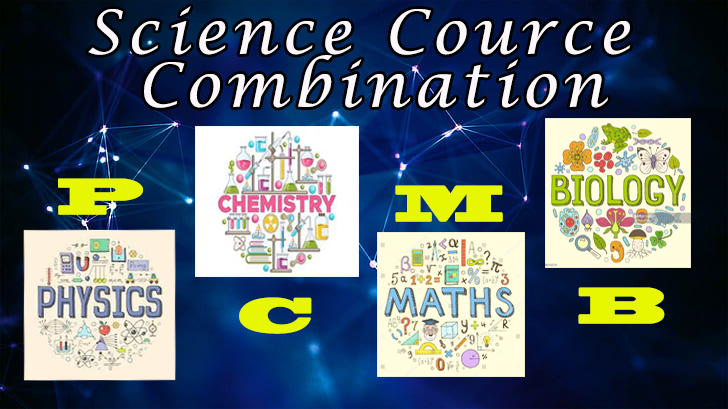
<style>
.page{position:relative;width:728px;height:409px}
.page>*{position:absolute;margin:0}
.t1{font:60px/53px "LucidaCalligraphy-Italic";letter-spacing:0.1em;color:#fbf7fd}
.t2{font:48px "BlackoakStd";letter-spacing:0.1em;color:#e7f702}
</style>
<div class="page">
<p class="t1" style="left:88px;top:6px;width:542px;height:102px;text-align:center">Science Cource <br>Combination</p>
<p class="t2" style="left:58px;top:178px;width:85px;height:37px">P</p>
<p class="t2" style="left:395px;top:185px;width:108px;height:37px">M</p>
<p class="t2" style="left:578px;top:287px;width:87px;height:37px">B</p>
<p class="t2" style="left:239px;top:297px;width:73px;height:37px">C</p>
</div>
